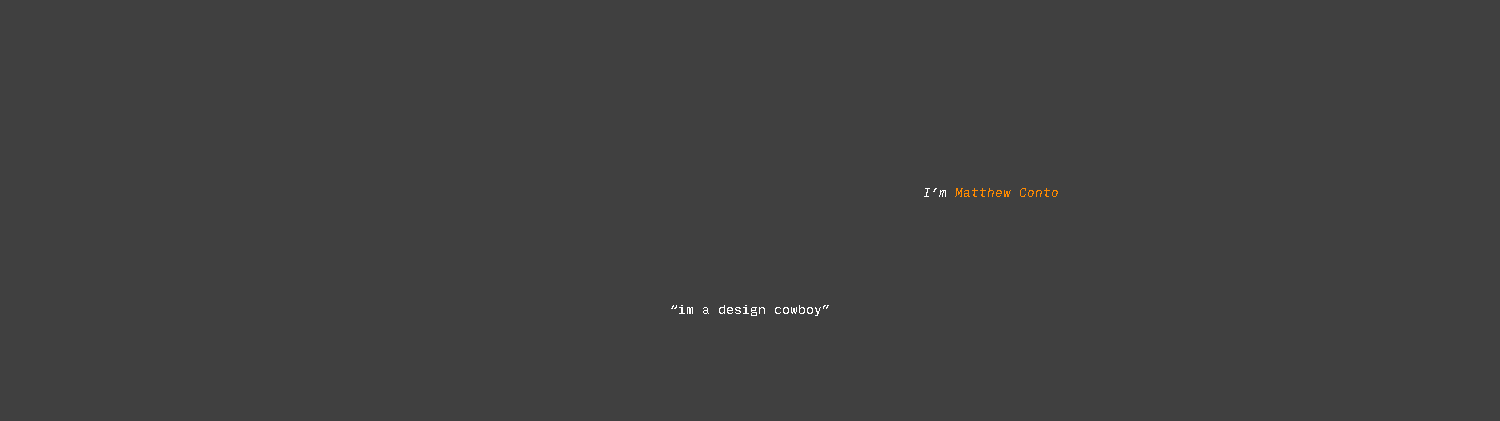
<style>
.page{position:relative;width:1500px;height:421px;background:#404040}
.page>*{position:absolute;margin:0}
.t1{font:12px "InputMono-Italic";color:#ff8a00}
.t2{font:12px "InputMono-Italic";color:#ffffff}
.t3{font:12px "InputMono-Regular";color:#ffffff}
</style>
<div class="page">
<p class="t1" style="left:924px;top:188px;width:134px;height:9px"><span class="t2">I’m </span>Matthew Conto</p>
<p class="t3" style="left:671px;top:305px;width:158px;height:11px">“im a design cowboy”</p>
</div>
